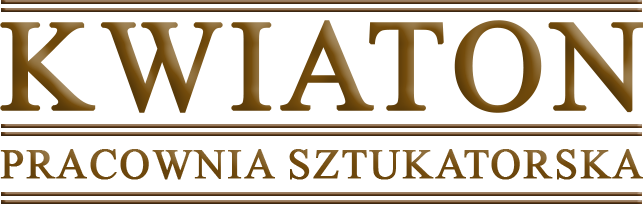
<style>
.page{position:relative;width:643px;height:204px;background:#ffffff}
.page>*{position:absolute;margin:0}
.t1{font:128px "TimesNewRomanPSMT";letter-spacing:0.038em;color:#734b0d;font-weight:bold}
.t2{font:42px "TimesNewRomanPSMT";letter-spacing:0.032em;color:#734b0d;font-weight:bold}
</style>
<div class="page">
<p class="t1" style="left:0px;top:20px;width:645px;height:93px">KWIATON</p>
<p class="t2" style="left:0px;top:149px;width:643px;height:31px">PRACOWNIA SZTUKATORSKA</p>
</div>
